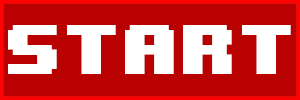
<style>
.page{position:relative;width:300px;height:100px;background:#b90101}
.page>*{position:absolute;margin:0}
.t1{font:58.3px "8BITWONDERNominal";color:#ffffff}
</style>
<div class="page">
<p class="t1" style="left:8px;top:25px;width:283px;height:49px">Start</p>
</div>
